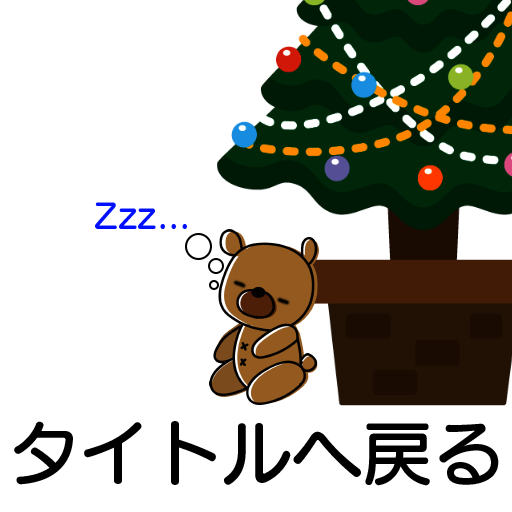
<style>
.page{position:relative;width:512px;height:512px;background:#ffffff}
.page>*{position:absolute;margin:0}
.t1{font:34.3px "SeuratProN-DB";color:#0011ff}
.t2{font:70.9px "SeuratProN-DB";color:#000000}
</style>
<div class="page">
<p class="t1" style="left:95px;top:202px;width:92px;height:27px">Zzz...</p>
<p class="t2" style="left:14px;top:421px;width:485px;height:65px">タイトルへ戻る</p>
</div>
